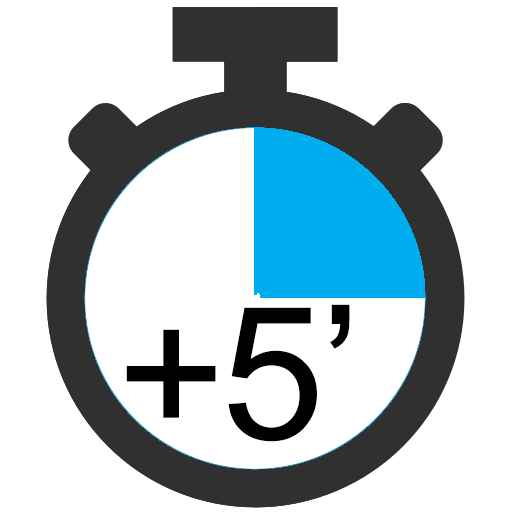
<style>
.page{position:relative;width:512px;height:512px;background:#ffffff}
.page>*{position:absolute;margin:0}
.t1{font:185.1px "ArialMT";letter-spacing:-0.02em;color:#000000}
</style>
<div class="page">
<p class="t1" style="left:126px;top:304px;width:224px;height:138px">+5’</p>
</div>
